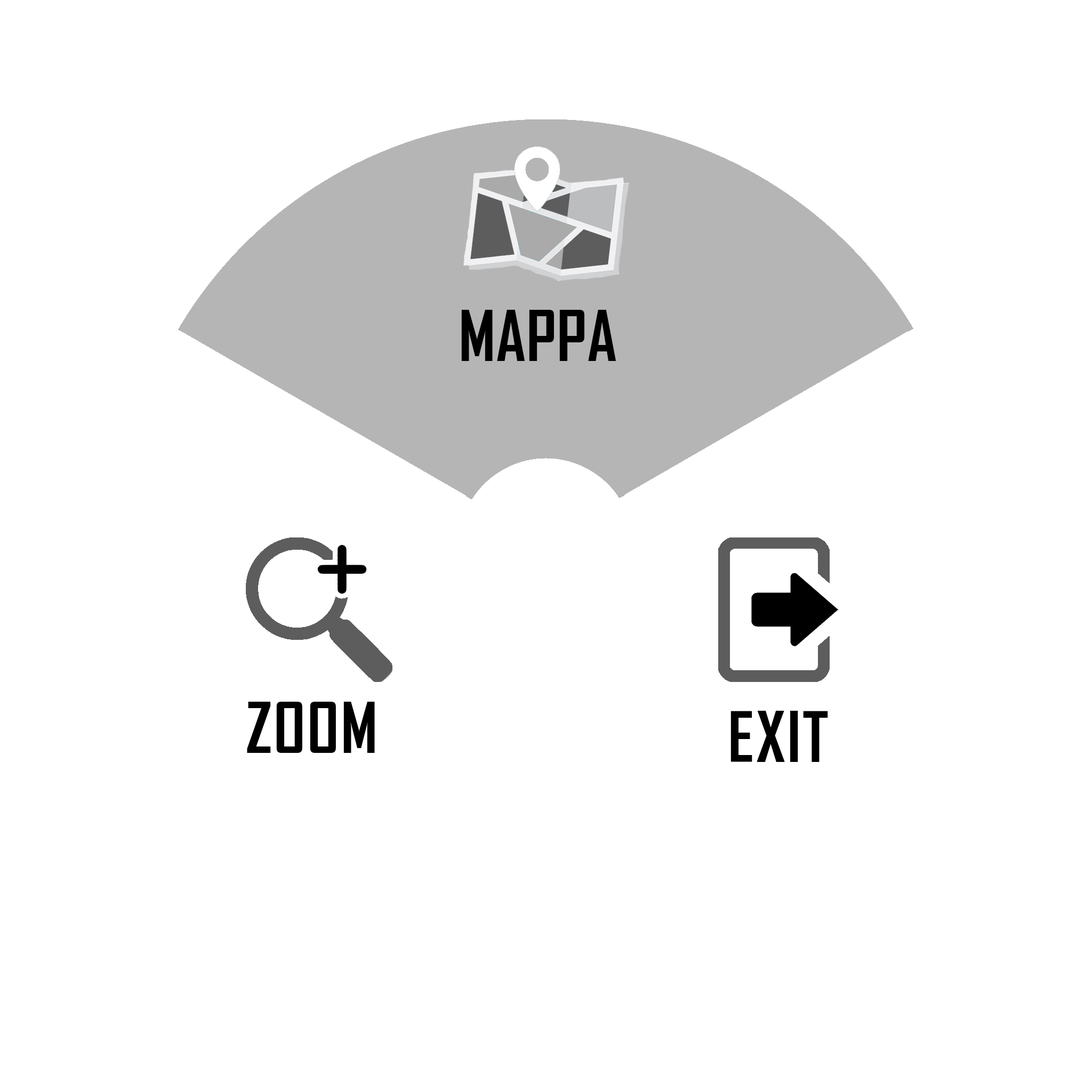
<style>
.page{position:relative;width:1092px;height:1092px;background:#ffffff}
.page>*{position:absolute;margin:0}
.t1{font:66.6px "AgencyFB-Bold";letter-spacing:0.005em;color:#000000}
.t2{font:66.6px "AgencyFB-Bold";letter-spacing:0.025em;color:#000000}
</style>
<div class="page">
<p class="t1" style="left:461px;top:310px;width:155px;height:51px">MAPPA</p>
<p class="t2" style="left:247px;top:702px;width:128px;height:51px">ZOOM</p>
<p class="t2" style="left:730px;top:711px;width:98px;height:51px">EXIT</p>
</div>
